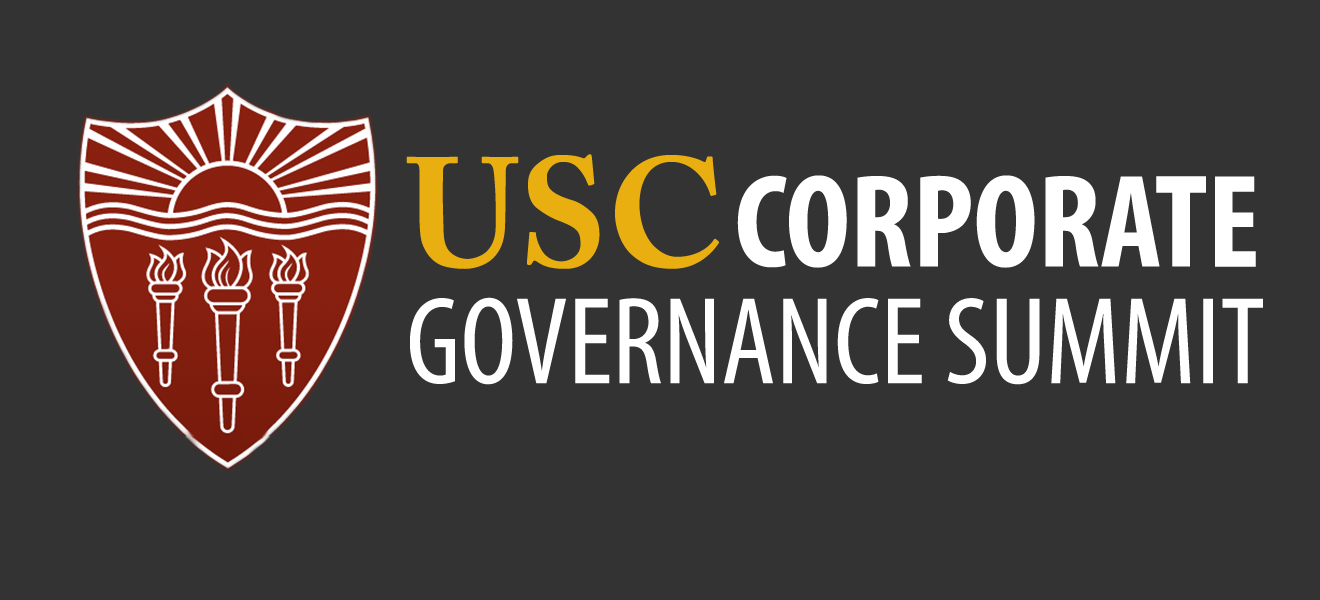
<style>
.page{position:relative;width:1320px;height:600px;background:#333333}
.page>*{position:absolute;margin:0}
.t1{font:125px/116.7px "MyriadPro-Cond";color:#ffffff}
.t2{font:154.2px/91.7px "ACaslonPro-Bold";color:#e9af11}
.t3{font:133.4px/91.7px "MyriadPro-BoldCond";color:#ffffff}
</style>
<div class="page">
<p class="t1" style="left:406px;top:154px;width:857px;height:231px"><span class="t2">USC </span><span class="t3">CORPORATE<br></span>GOVERNANCE SUMMIT</p>
</div>
